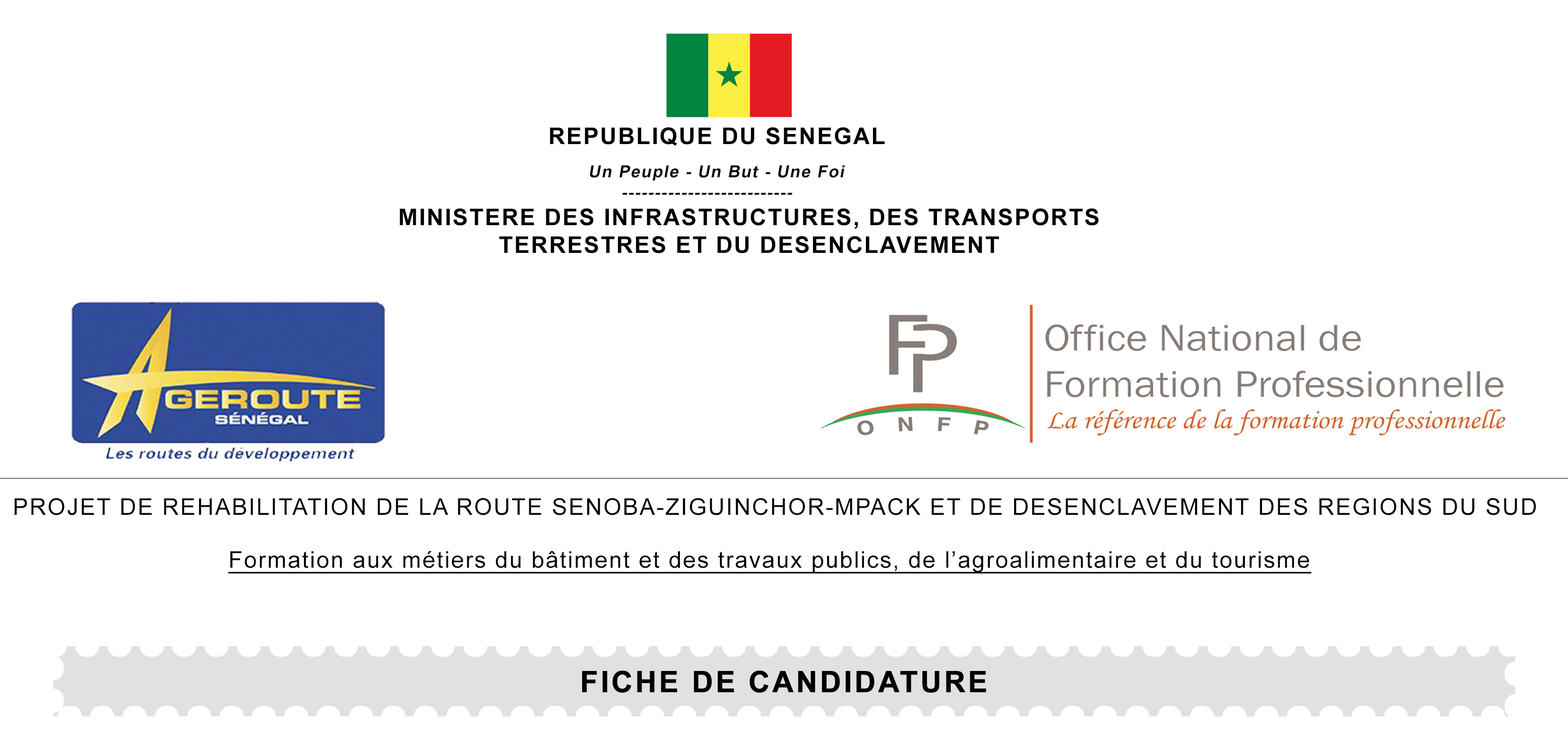
<style>
.page{position:relative;width:1568px;height:740px;background:#ffffff}
.page>*{position:absolute;margin:0}
.t1{font:23.1px "Arial-BoldMT";letter-spacing:0.06em;color:#000000}
.t2{font:16.8px "Arial-BoldMT";letter-spacing:0.06em;color:#000000;font-style:italic}
.t3{font:23.1px "ArialMT";letter-spacing:0.06em;color:#000000}
.t4{font:23.1px "ArialMT";letter-spacing:0.06em;color:#000000;text-decoration:underline}
.t5{font:29.4px "Arial-BoldMT";letter-spacing:0.06em;color:#000000;font-weight:bold}
</style>
<div class="page">
<p class="t1" style="left:550px;top:127px;width:335px;height:19px">REPUBLIQUE DU SENEGAL</p>
<p class="t2" style="left:590px;top:165px;width:255px;height:16px">Un Peuple - Un But - Une Foi</p>
<p class="t2" style="left:622px;top:193px;width:170px;height:2px">--------------------------</p>
<p class="t1" style="left:400px;top:208px;width:699px;height:46px;text-align:center">MINISTERE DES INFRASTRUCTURES, DES TRANSPORTS<br>TERRESTRES ET DU DESENCLAVEMENT</p>
<p class="t3" style="left:15px;top:498px;width:1521px;height:18px">PROJET DE REHABILITATION DE LA ROUTE SENOBA-ZIGUINCHOR-MPACK ET DE DESENCLAVEMENT DES REGIONS DU SUD</p>
<p class="t4" style="left:228px;top:551px;width:1083px;height:23px">Formation aux métiers du bâtiment et des travaux publics, de l’agroalimentaire et du tourisme</p>
<p class="t5" style="left:582px;top:671px;width:404px;height:22px">FICHE DE CANDIDATURE</p>
</div>
